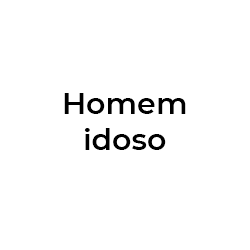
<style>
.page{position:relative;width:250px;height:250px;background:#ffffff}
.page>*{position:absolute;margin:0}
.t1{font:30px "Montserrat-SemiBold";color:#000000}
</style>
<div class="page">
<p class="t1" style="left:64px;top:93px;width:122px;height:57px;text-align:center">Homem<br>idoso</p>
</div>
